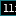
<style>
.page{position:relative;width:16px;height:16px;background:#000000}
.page>*{position:absolute;margin:0}
.t1{font:11px "SegoeUI-Light";color:#fefefe}
</style>
<div class="page">
<p class="t1" style="left:4px;top:4px;width:13px;height:8px">11:41</p>
</div>
